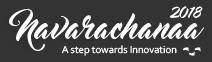
<style>
.page{position:relative;width:212px;height:62px;background:#333333}
.page>*{position:absolute;margin:0}
.t1{font:16.3px "MasterOfBreak";color:#ffffff}
.t2{font:32px "MasterOfBreak";color:#ffffff}
.t3{font:10.7px "Corbel";color:#feffff}
</style>
<div class="page">
<p class="t1" style="left:169px;top:6px;width:34px;height:12px">2018</p>
<p class="t2" style="left:9px;top:9px;width:195px;height:42px">Navarachanaa</p>
<p class="t3" style="left:61px;top:45px;width:116px;height:11px">A step towards Innovation</p>
</div>
